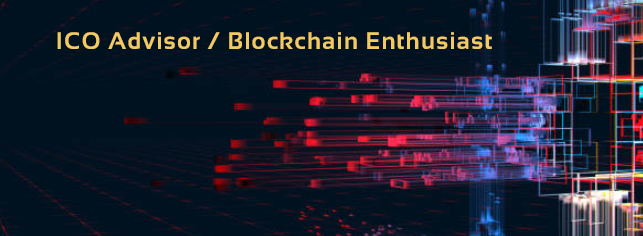
<style>
.page{position:relative;width:643px;height:236px;background:#001220}
.page>*{position:absolute;margin:0}
.t1{font:24px "Sansation-Bold";letter-spacing:0.05em;color:#f3c964}
</style>
<div class="page">
<p class="t1" style="left:57px;top:32px;width:435px;height:17px">ICO Advisor / Blockchain Enthusiast</p>
</div>
